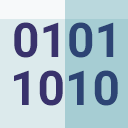
<style>
.page{position:relative;width:128px;height:128px;background:#dceaec}
.page>*{position:absolute;margin:0}
.t1{font:48px "Roboto-Bold";color:#39326c}
</style>
<div class="page">
<p class="t1" style="left:14px;top:22px;width:100px;height:36px">0101</p>
<p class="t1" style="left:14px;top:70px;width:104px;height:36px">1010</p>
</div>
